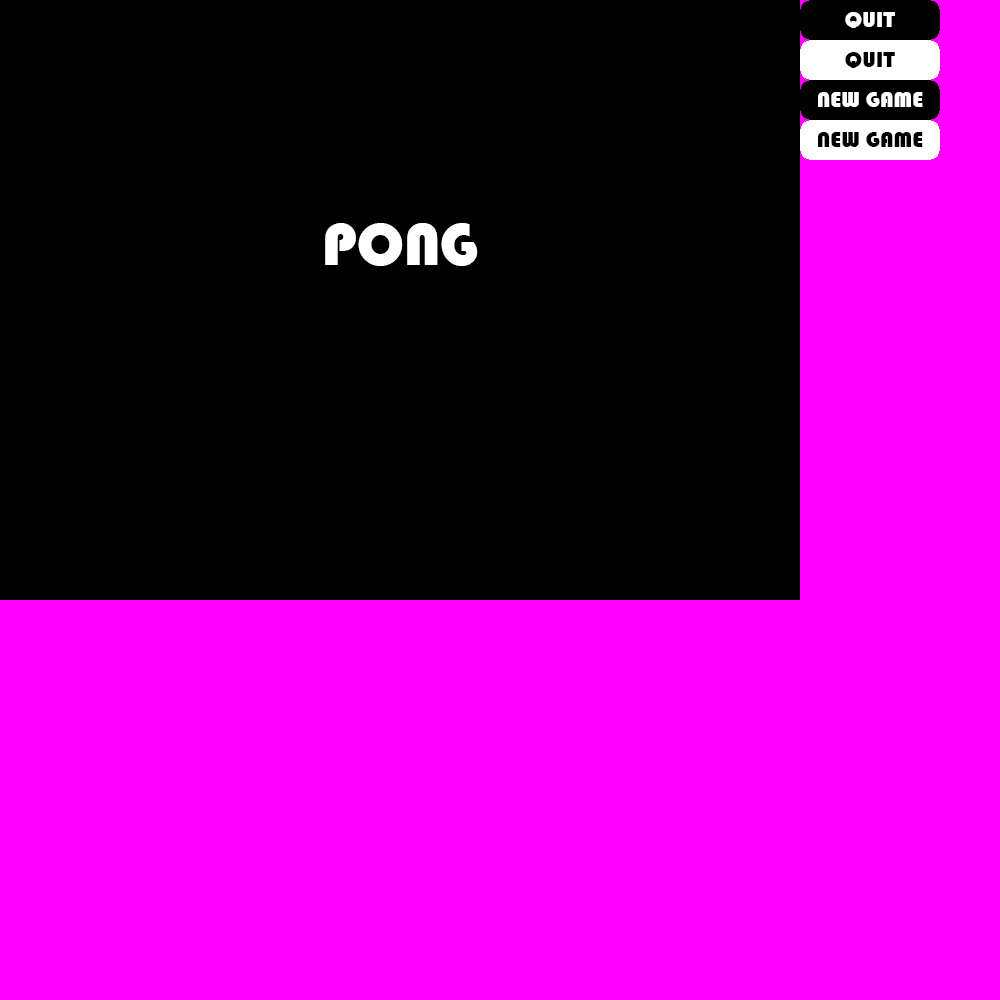
<style>
.page{position:relative;width:1000px;height:1000px;background:#ff00ff}
.page>*{position:absolute;margin:0}
.t1{font:23px "Bauhaus93";color:#ffffff}
.t2{font:23px "Bauhaus93";color:#000000}
.t3{font:62px "Bauhaus93";color:#ffffff}
</style>
<div class="page">
<p class="t1" style="left:845px;top:12px;width:50px;height:16px">QUIT</p>
<p class="t2" style="left:845px;top:52px;width:50px;height:16px">QUIT</p>
<p class="t1" style="left:818px;top:92px;width:105px;height:15px">NEW GAME</p>
<p class="t2" style="left:818px;top:132px;width:105px;height:15px">NEW GAME</p>
<p class="t3" style="left:325px;top:223px;width:153px;height:43px">PONG</p>
</div>
